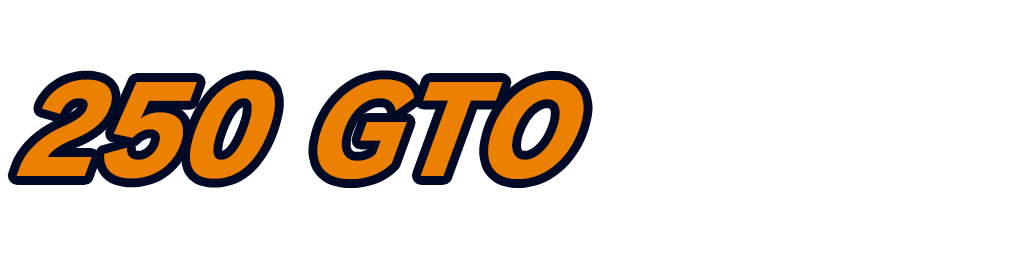
<style>
.page{position:relative;width:1024px;height:256px;background:#ffffff}
.page>*{position:absolute;margin:0}
.t1{font:128px "RodinPro-EB";letter-spacing:0.001em;color:#ec8002;scale:0.94 1}
</style>
<div class="page">
<p class="t1" style="left:16px;top:79px;width:568px;height:100px">250 GTO</p>
</div>
